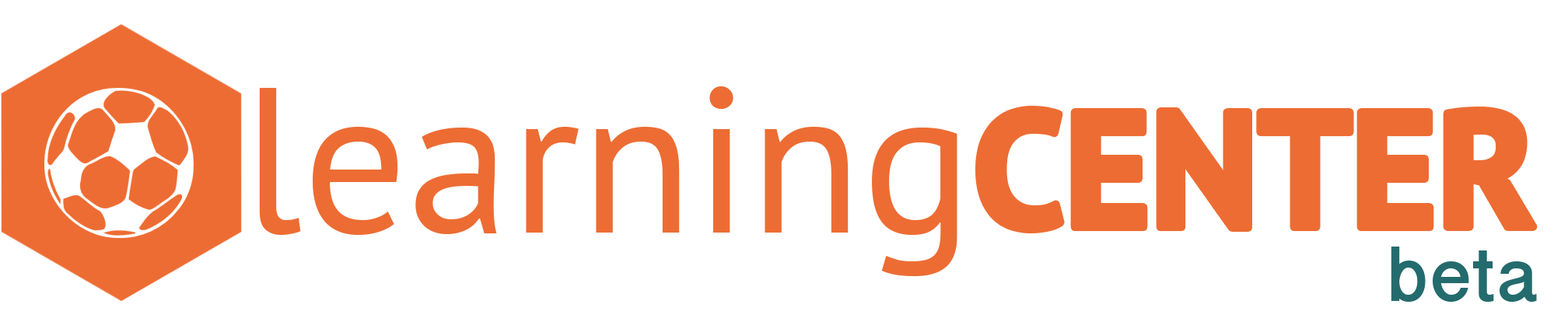
<style>
.page{position:relative;width:1568px;height:329px;background:#ffffff}
.page>*{position:absolute;margin:0}
.t1{font:206.9px "PTSans-Regular";color:#ed6c33}
.t2{font:164.1px "PTSans-Bold";color:#ed6c33}
.t3{font:87.1px "OriyaSangamMN-Bold";color:#246b6d}
</style>
<div class="page">
<p class="t1" style="left:259px;top:86px;width:698px;height:190px">learning</p>
<p class="t2" style="left:979px;top:110px;width:555px;height:119px">CENTER</p>
<p class="t3" style="left:1391px;top:247px;width:146px;height:55px">beta</p>
</div>
